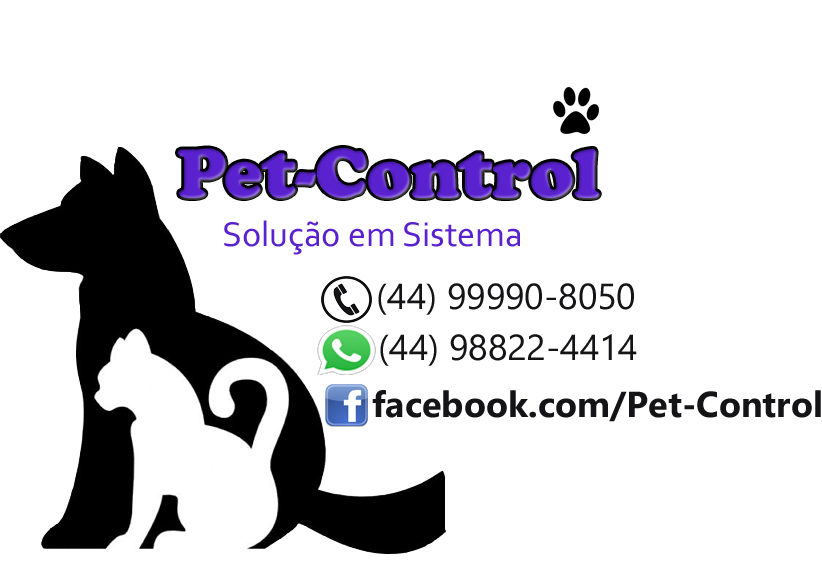
<style>
.page{position:relative;width:822px;height:566px;background:#ffffff}
.page>*{position:absolute;margin:0}
.t1{font:72px "CooperBlack";color:#5a21ce}
.t2{font:36px "Corbel";color:#5a21ce}
.t3{font:36px "Ebrima";color:#141316}
.t4{font:36px "Ebrima-Bold";color:#141316}
</style>
<div class="page">
<p class="t1" style="left:178px;top:148px;width:421px;height:50px">Pet-Control</p>
<p class="t2" style="left:224px;top:220px;width:296px;height:35px">Solução em Sistema</p>
<p class="t3" style="left:378px;top:283px;width:256px;height:32px">(44) 99990-8050</p>
<p class="t3" style="left:380px;top:334px;width:257px;height:32px">(44) 98822-4414</p>
<p class="t4" style="left:372px;top:390px;width:449px;height:32px">facebook.com/Pet-Control</p>
</div>
